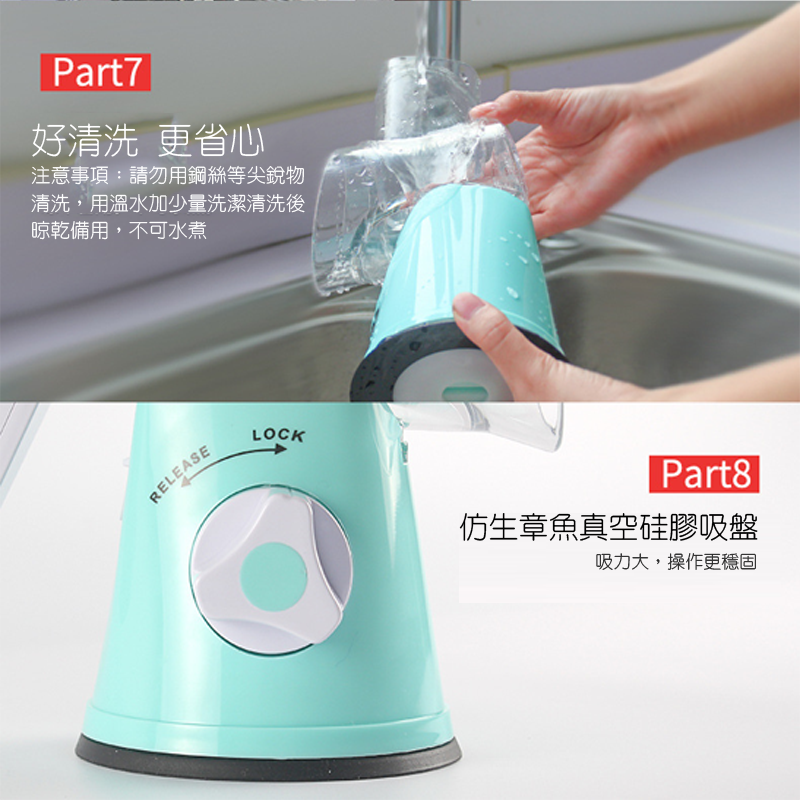
<style>
.page{position:relative;width:800px;height:800px}
.page>*{position:absolute;margin:0}
.t1{font:36px "HanWangYenLight";color:#ffffff}
.t2{font:19.6px "HanWangYenLight";color:#ffffff}
.t3{font:30px "HanWangYenLight";color:#000000}
.t4{font:18px "HanWangYenLight";color:#272727}
</style>
<div class="page">
<p class="t1" style="left:32px;top:123px;width:232px;height:34px">好清洗 更省心</p>
<p class="t2" style="left:31px;top:165px;width:274px;height:75px">注意事項：請勿用鋼絲等尖銳物<br>清洗，用溫水加少量洗潔清洗後<br>晾乾備用，不可水煮</p>
<p class="t3" style="left:459px;top:513px;width:299px;height:28px">仿生章魚真空硅膠吸盤</p>
<p class="t4" style="left:596px;top:553px;width:160px;height:17px">吸力大，操作更穩固</p>
</div>
